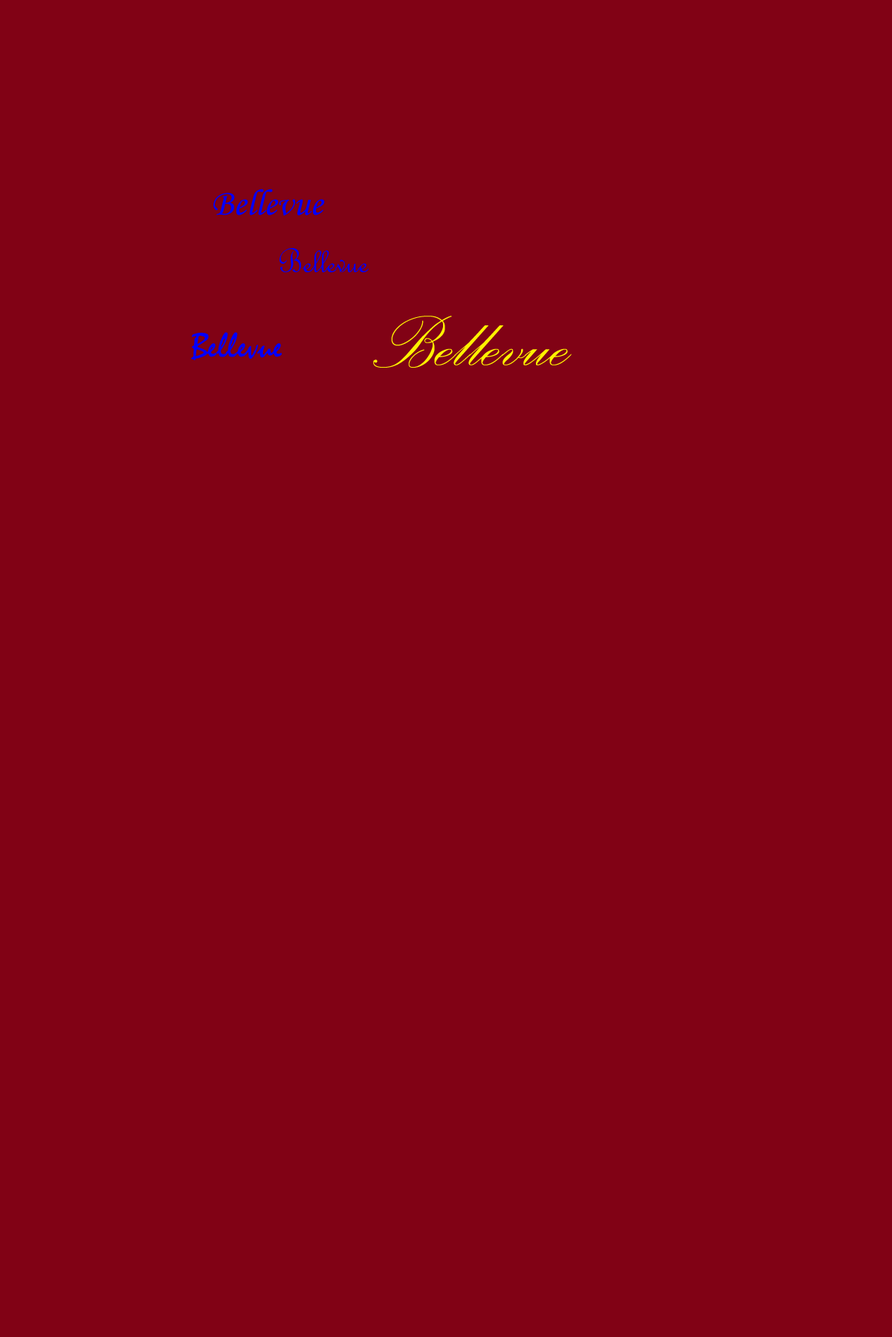
<style>
.page{position:relative;width:892px;height:1337px;background:#810215}
.page>*{position:absolute;margin:0}
.t1{font:37px "MonotypeCorsiva";color:#0000ff}
.t2{font:37px "FrenchScriptMT";color:#0000ff}
.t3{font:92.5px "PalaceScriptMT";color:#fff200}
.t4{font:37px "Mistral";color:#0000ff}
</style>
<div class="page">
<p class="t1" style="left:213px;top:189px;width:112px;height:27px">Bellevue</p>
<p class="t2" style="left:279px;top:248px;width:90px;height:25px">Bellevue</p>
<p class="t3" style="left:373px;top:316px;width:198px;height:53px">Bellevue</p>
<p class="t4" style="left:191px;top:332px;width:91px;height:28px">Bellevue</p>
</div>
